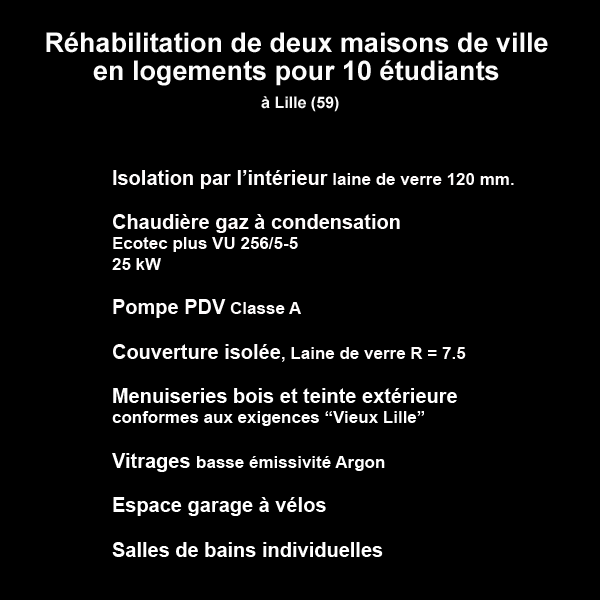
<style>
.page{position:relative;width:600px;height:600px;background:#000000}
.page>*{position:absolute;margin:0}
.t1{font:27px/28px "Arial-BoldMT";color:#fcfcfc}
.t2{font:16px/28px "Arial-BoldMT";color:#f9f9f9}
.t3{font:20px "Arial-BoldMT";color:#ffffff}
.t4{font:20px "Arial-BoldMT";color:#fefcfc}
.t5{font:17px "Arial-BoldMT";color:#fefcfc}
.t6{font:17px "Arial-BoldMT";color:#ffffff}
</style>
<div class="page">
<p class="t1" style="left:46px;top:32px;width:502px;height:80px;text-align:center">Réhabilitation de deux maisons de ville <br>en logements pour 10 étudiants <br><span class="t2">à Lille (59)</span></p>
<p class="t3" style="left:112px;top:170px;width:402px;height:387px"><span class="t4">Isolation par l’intérieur</span><span class="t5"> laine de verre 120 mm.<br><br></span><span class="t4">Chaudière gaz à condensation<br></span><span class="t5">Ecotec plus VU 256/5-5<br>25 kW <br><br></span><span class="t4">Pompe PDV</span><span class="t5"> Classe A <br><br></span><span class="t4">Couverture isolée</span><span class="t5">, Laine de verre R = 7.5<br><br></span>Menuiseries bois et teinte extérieure <br><span class="t6">conformes aux exigences “Vieux Lille”<br><br></span>Vitrages <span class="t6">basse émissivité Argon <br><br></span>Espace garage à vélos<br><br>Salles de bains individuelles</p>
</div>
